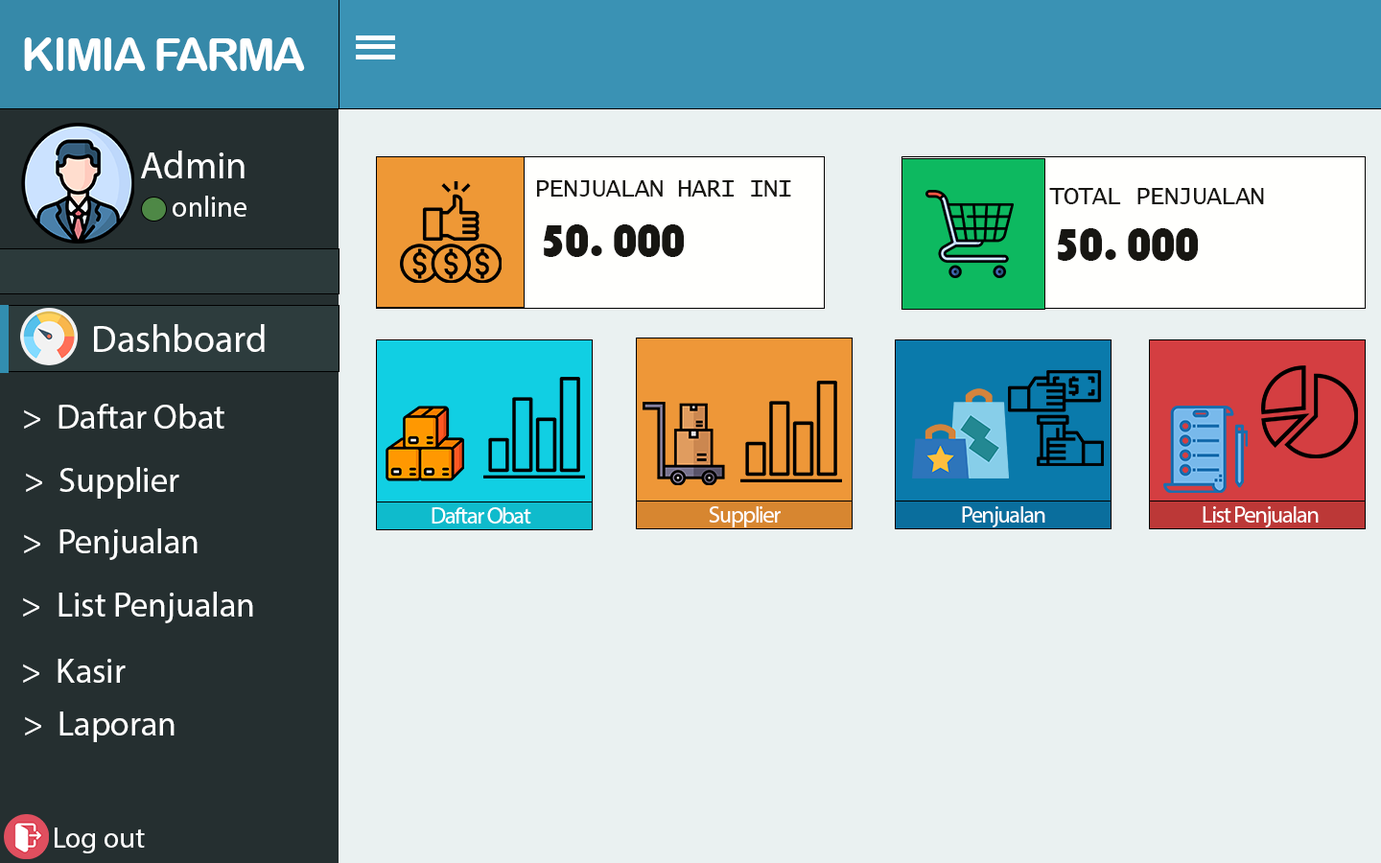
<style>
.page{position:relative;width:1381px;height:863px;background:#eaf1f1}
.page>*{position:absolute;margin:0}
.t1{font:46px "ArialRoundedMTBold";letter-spacing:-0.05em;color:#ffffff}
.t2{font:38.4px "MyriadPro-Regular";color:#ffffff}
.t3{font:25.9px "LucidaConsole";letter-spacing:-0.05em;color:#171612}
.t4{font:28.8px "MyriadPro-Regular";color:#ffffff}
.t5{font:46px "Bauhaus93";letter-spacing:-0.05em;color:#171612}
.t6{font:34.5px "MyriadPro-Regular";color:#ffffff}
.t7{font:23px "MyriadPro-Regular";letter-spacing:-0.05em;color:#ffffff}
</style>
<div class="page">
<p class="t1" style="left:24px;top:37px;width:281px;height:34px">KIMIA FARMA</p>
<p class="t2" style="left:141px;top:151px;width:104px;height:27px">Admin</p>
<p class="t3" style="left:537px;top:180px;width:254px;height:17px">PENJUALAN HARI INI</p>
<p class="t4" style="left:173px;top:196px;width:74px;height:21px">online</p>
<p class="t3" style="left:1049px;top:188px;width:215px;height:16px">TOTAL PENJUALAN</p>
<p class="t5" style="left:544px;top:224px;width:140px;height:33px">50. 000</p>
<p class="t5" style="left:1058px;top:228px;width:140px;height:33px">50. 000</p>
<p class="t2" style="left:94px;top:324px;width:171px;height:28px">Dashboard</p>
<p class="t6" style="left:24px;top:404px;width:200px;height:25px">&gt;  Daftar Obat</p>
<p class="t6" style="left:26px;top:467px;width:153px;height:32px">&gt;  Supplier</p>
<p class="t7" style="left:432px;top:507px;width:99px;height:17px">Daftar Obat</p>
<p class="t7" style="left:709px;top:506px;width:72px;height:22px">Supplier</p>
<p class="t7" style="left:962px;top:506px;width:84px;height:22px">Penjualan</p>
<p class="t7" style="left:1203px;top:506px;width:116px;height:22px">List Penjualan</p>
<p class="t6" style="left:24px;top:529px;width:174px;height:31px">&gt;  Penjualan</p>
<p class="t6" style="left:23px;top:592px;width:230px;height:31px">&gt;  List Penjualan</p>
<p class="t6" style="left:23px;top:659px;width:103px;height:24px">&gt;  Kasir</p>
<p class="t6" style="left:25px;top:712px;width:150px;height:30px">&gt;  Laporan</p>
<p class="t4" style="left:55px;top:828px;width:90px;height:26px">Log out</p>
</div>
